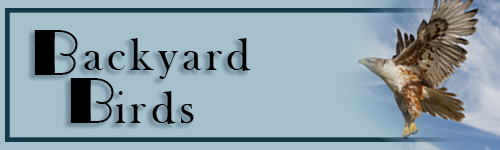
<style>
.page{position:relative;width:500px;height:150px;background:#a5c1ce}
.page>*{position:absolute;margin:0}
.t1{font:66.7px "Broadway";color:#000000}
.t2{font:45.8px "BaskOldFace";letter-spacing:0.1em;color:#000000}
</style>
<div class="page">
<p class="t1" style="left:34px;top:30px;width:44px;height:45px">B</p>
<p class="t2" style="left:84px;top:38px;width:167px;height:41px">ackyard</p>
<p class="t1" style="left:70px;top:78px;width:44px;height:45px">B</p>
<p class="t2" style="left:115px;top:91px;width:79px;height:33px">irds</p>
</div>
